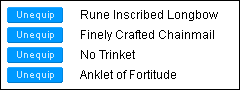
<style>
.page{position:relative;width:240px;height:90px;background:#ffffff}
.page>*{position:absolute;margin:0}
.t1{font:10px "ArialMT";color:#ccebff}
.t2{font:12px "ArialMT";color:#000000}
</style>
<div class="page">
<p class="t1" style="left:17px;top:11px;width:37px;height:9px">Unequip</p>
<p class="t2" style="left:81px;top:10px;width:137px;height:11px">Rune Inscribed Longbow</p>
<p class="t2" style="left:81px;top:30px;width:133px;height:11px">Finely Crafted Chainmail</p>
<p class="t1" style="left:17px;top:31px;width:37px;height:9px">Unequip</p>
<p class="t1" style="left:17px;top:51px;width:37px;height:9px">Unequip</p>
<p class="t2" style="left:81px;top:50px;width:54px;height:9px">No Trinket</p>
<p class="t1" style="left:17px;top:71px;width:37px;height:9px">Unequip</p>
<p class="t2" style="left:80px;top:70px;width:96px;height:9px">Anklet of Fortitude</p>
</div>
